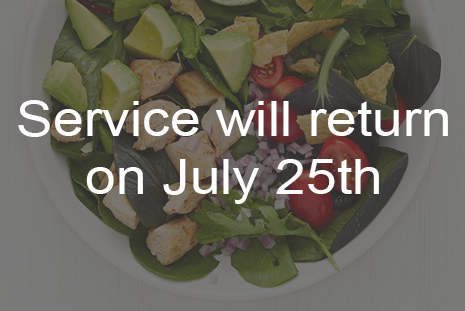
<style>
.page{position:relative;width:465px;height:311px}
.page>*{position:absolute;margin:0}
.t1{font:48px "ArialMT";color:#ffffff;scale:1.15 1}
</style>
<div class="page">
<p class="t1" style="left:18px;top:100px;width:430px;height:104px;text-align:center">Service will return<br>on July 25th</p>
</div>
